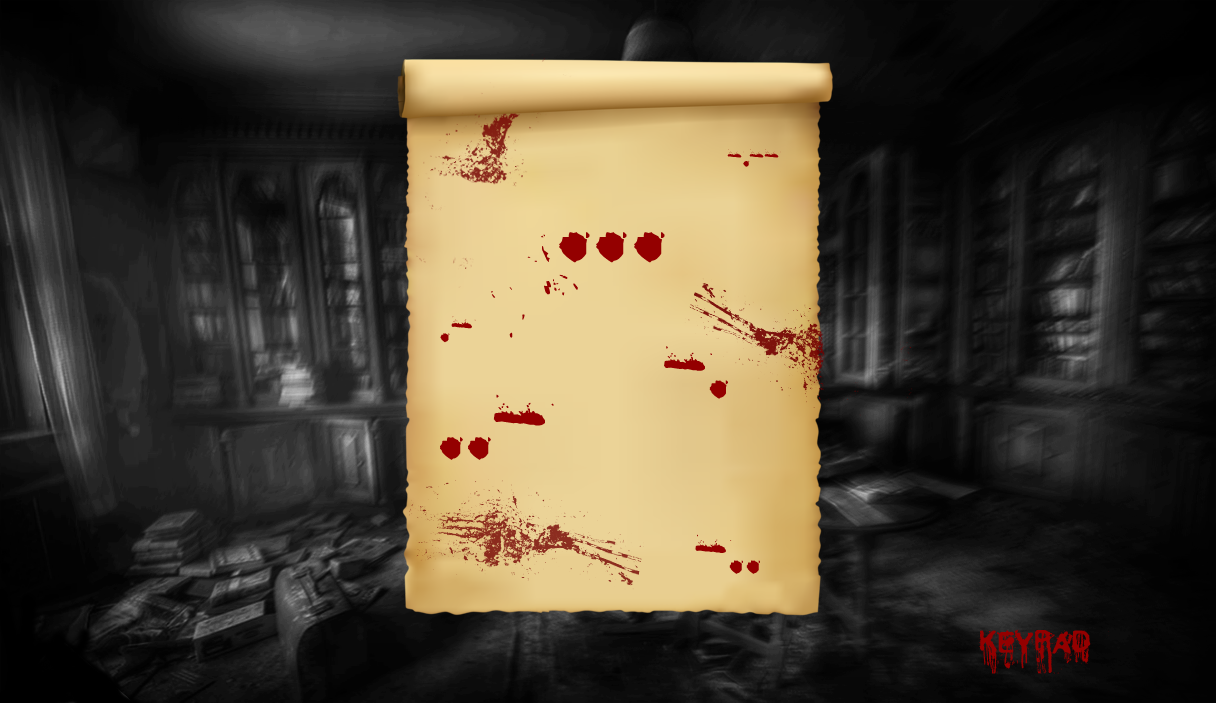
<style>
.page{position:relative;width:1216px;height:703px}
.page>*{position:absolute;margin:0}
.t1{font:40px "ColdNightforAlligators";color:#940000}
.t2{font:200px "ColdNightforAlligators";color:#940000}
.t3{font:60px "ColdNightforAlligators";color:#940000}
.t4{font:120px "ColdNightforAlligators";color:#940000}
.t5{font:150px "ColdNightforAlligators";color:#940000}
.t6{font:90px "ColdNightforAlligators";color:#940000}
</style>
<div class="page">
<p class="t1" style="left:727px;top:149px;width:54px;height:18px">-.--</p>
<p class="t2" style="left:491px;top:232px;width:174px;height:106px">...</p>
<p class="t3" style="left:440px;top:316px;width:36px;height:27px">.-</p>
<p class="t4" style="left:664px;top:346px;width:64px;height:53px">-.</p>
<p class="t5" style="left:440px;top:394px;width:114px;height:66px">..-</p>
<p class="t6" style="left:695px;top:534px;width:65px;height:40px">-..</p>
<p class="t1" style="left:979px;top:629px;width:130px;height:45px">KeyPad</p>
</div>
